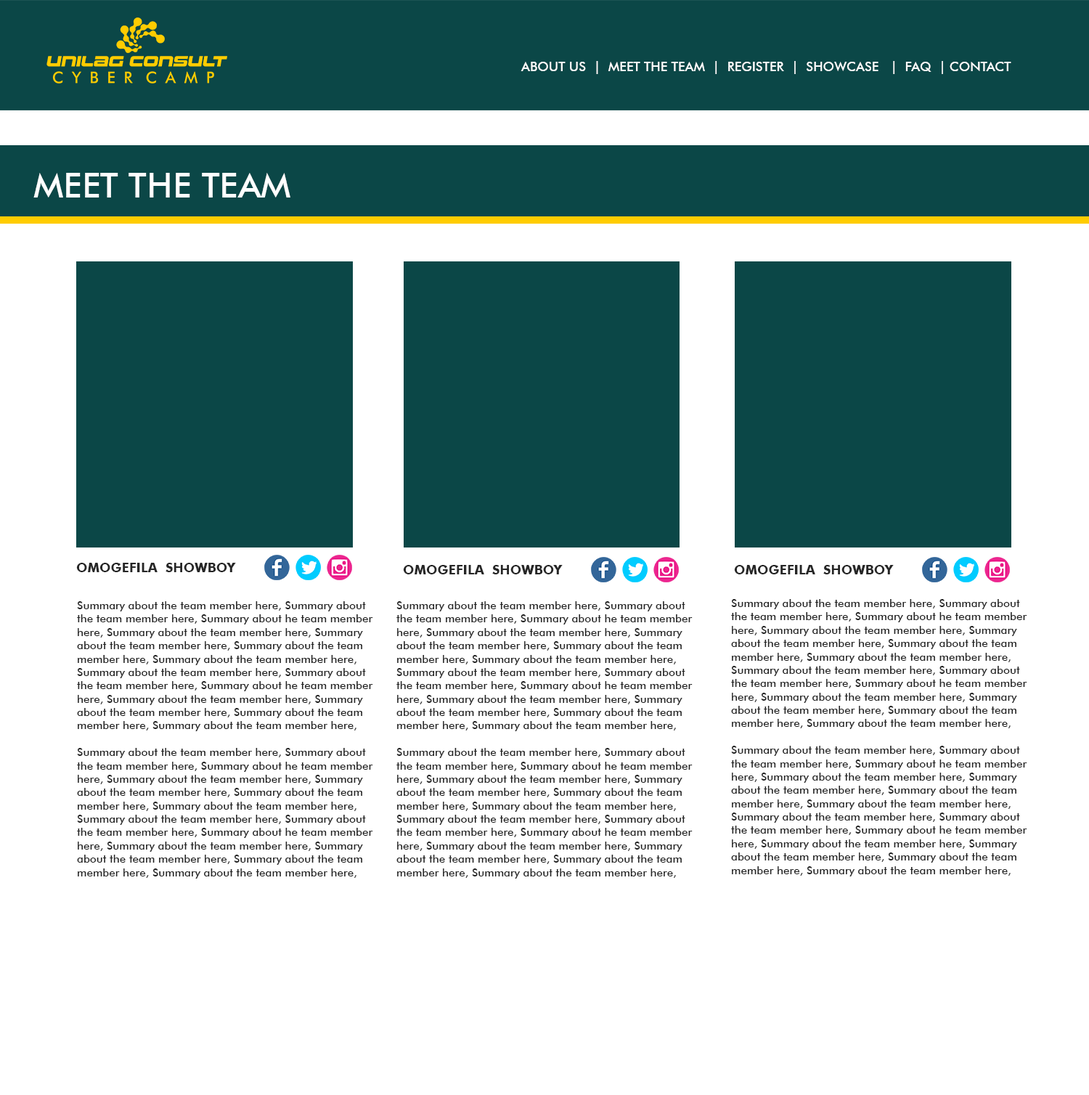
<style>
.page{position:relative;width:1089px;height:1095px;background:#ffffff}
.page>*{position:absolute;margin:0}
.t1{font:13.1px "FuturaBT-Medium";color:#ffffff}
.t2{font:34.8px "FuturaBT-Medium";color:#ffffff}
.t3{font:13.1px "FuturaBT-Bold";color:#262626}
.t4{font:11.1px "FuturaBT-Medium";color:#242424}
</style>
<div class="page">
<p class="t1" style="left:521px;top:61px;width:490px;height:13px">ABOUT US  |  MEET THE TEAM  |  REGISTER  |  SHOWCASE   |  FAQ  | CONTACT</p>
<p class="t2" style="left:33px;top:173px;width:257px;height:24px">MEET THE TEAM</p>
<p class="t3" style="left:76px;top:563px;width:160px;height:9px">OMOGEFILA  SHOWBOY</p>
<p class="t3" style="left:403px;top:565px;width:160px;height:9px">OMOGEFILA  SHOWBOY</p>
<p class="t3" style="left:734px;top:565px;width:160px;height:9px">OMOGEFILA  SHOWBOY</p>
<p class="t4" style="left:77px;top:601px;width:296px;height:278px">Summary about the team member here, Summary about<br>the team member here, Summary about he team member<br>here, Summary about the team member here, Summary <br>about the team member here, Summary about the team<br>member here, Summary about the team member here, <br>Summary about the team member here, Summary about<br>the team member here, Summary about he team member<br>here, Summary about the team member here, Summary <br>about the team member here, Summary about the team<br>member here, Summary about the team member here,<br><br>Summary about the team member here, Summary about<br>the team member here, Summary about he team member<br>here, Summary about the team member here, Summary <br>about the team member here, Summary about the team<br>member here, Summary about the team member here, <br>Summary about the team member here, Summary about<br>the team member here, Summary about he team member<br>here, Summary about the team member here, Summary <br>about the team member here, Summary about the team<br>member here, Summary about the team member here,</p>
<p class="t4" style="left:396px;top:601px;width:297px;height:278px">Summary about the team member here, Summary about<br>the team member here, Summary about he team member<br>here, Summary about the team member here, Summary <br>about the team member here, Summary about the team<br>member here, Summary about the team member here, <br>Summary about the team member here, Summary about<br>the team member here, Summary about he team member<br>here, Summary about the team member here, Summary <br>about the team member here, Summary about the team<br>member here, Summary about the team member here,<br><br>Summary about the team member here, Summary about<br>the team member here, Summary about he team member<br>here, Summary about the team member here, Summary <br>about the team member here, Summary about the team<br>member here, Summary about the team member here, <br>Summary about the team member here, Summary about<br>the team member here, Summary about he team member<br>here, Summary about the team member here, Summary <br>about the team member here, Summary about the team<br>member here, Summary about the team member here,</p>
<p class="t4" style="left:731px;top:599px;width:296px;height:277px">Summary about the team member here, Summary about<br>the team member here, Summary about he team member<br>here, Summary about the team member here, Summary <br>about the team member here, Summary about the team<br>member here, Summary about the team member here, <br>Summary about the team member here, Summary about<br>the team member here, Summary about he team member<br>here, Summary about the team member here, Summary <br>about the team member here, Summary about the team<br>member here, Summary about the team member here,<br><br>Summary about the team member here, Summary about<br>the team member here, Summary about he team member<br>here, Summary about the team member here, Summary <br>about the team member here, Summary about the team<br>member here, Summary about the team member here, <br>Summary about the team member here, Summary about<br>the team member here, Summary about he team member<br>here, Summary about the team member here, Summary <br>about the team member here, Summary about the team<br>member here, Summary about the team member here,</p>
</div>
